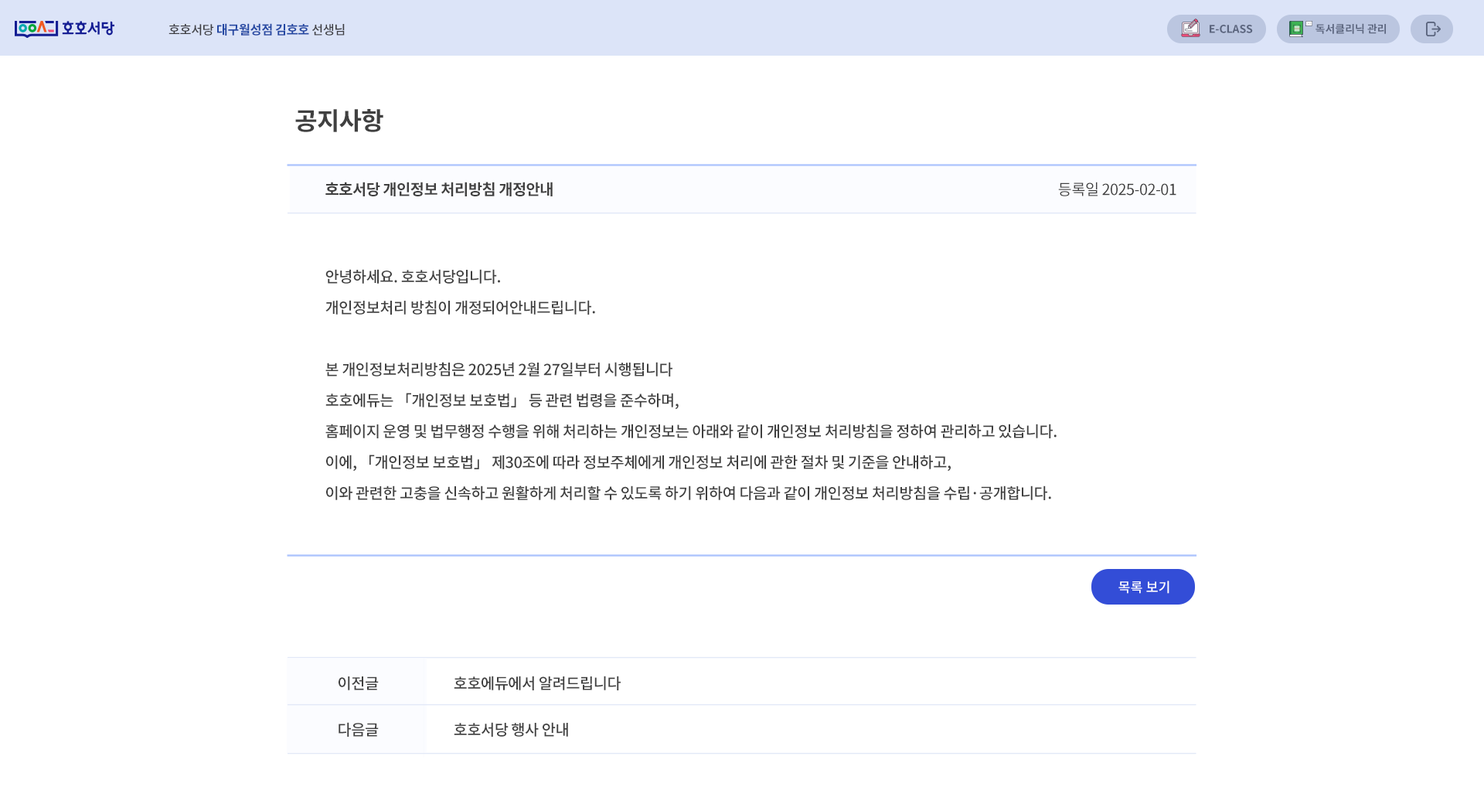
<style>
.page{position:relative;width:1484px;height:804px;background:#ffffff}
.page>*{position:absolute;margin:0}
.t1{font:12.6px "NotoSansCJKkr-Bold";letter-spacing:-0.025em;color:#2448a3;text-transform:uppercase}
.t2{font:12.6px "NotoSansCJKkr-Medium";letter-spacing:-0.025em;color:#3e3e43;text-transform:uppercase}
.t3{font:10.8px "NotoSansCJKkr-Bold";letter-spacing:-0.005em;color:#5b657e}
.t4{font:24.7px "NotoSansCJKkr-Bold";letter-spacing:-0.025em;color:#404040}
.t5{font:15.3px "NotoSansCJKkr-Bold";letter-spacing:-0.025em;color:#404040}
.t6{font:15.3px "NotoSansCJKkr-Regular";letter-spacing:-0.025em;color:#404040}
.t7{font:15.3px/30.9px "NotoSansCJKkr-Medium";letter-spacing:-0.025em;color:#404040}
.t8{font:13.5px "NotoSansCJKkr-Medium";color:#ffffff}
.t9{font:15.3px "NotoSansCJKkr-Medium";letter-spacing:-0.025em;color:#404040}
</style>
<div class="page">
<p class="t1" style="left:168px;top:23px;width:177px;height:13px"><span class="t2">호호서당 </span>대구월성점 김호호<span class="t2"> 선생님</span></p>
<p class="t3" style="left:1209px;top:25px;width:44px;height:8px">E-CLASS</p>
<p class="t3" style="left:1315px;top:23px;width:71px;height:11px">독서클리닉 관리</p>
<p class="t4" style="left:295px;top:109px;width:88px;height:23px">공지사항</p>
<p class="t5" style="left:325px;top:182px;width:228px;height:14px">호호서당 개인정보 처리방침 개정안내</p>
<p class="t6" style="left:1058px;top:182px;width:118px;height:14px">등록일 2025-02-01</p>
<p class="t7" style="left:325px;top:269px;width:731px;height:231px">안녕하세요. 호호서당입니다.<br>개인정보처리 방침이 개정되어안내드립니다. <br><br>본 개인정보처리방침은 2025년 2월 27일부터 시행됩니다<br>호호에듀는 「개인정보 보호법」 등 관련 법령을 준수하며, <br>홈페이지 운영 및 법무행정 수행을 위해 처리하는 개인정보는 아래와 같이 개인정보 처리방침을 정하여 관리하고 있습니다. <br>이에, 「개인정보 보호법」 제30조에 따라 정보주체에게 개인정보 처리에 관한 절차 및 기준을 안내하고, <br>이와 관련한 고충을 신속하고 원활하게 처리할 수 있도록 하기 위하여 다음과 같이 개인정보 처리방침을 수립·공개합니다.</p>
<p class="t8" style="left:1118px;top:580px;width:51px;height:13px">목록 보기</p>
<p class="t9" style="left:338px;top:676px;width:41px;height:14px">이전글</p>
<p class="t9" style="left:454px;top:675px;width:167px;height:15px">호호에듀에서 알려드립니다</p>
<p class="t9" style="left:338px;top:722px;width:41px;height:14px">다음글</p>
<p class="t9" style="left:454px;top:722px;width:114px;height:14px">호호서당 행사 안내</p>
</div>
